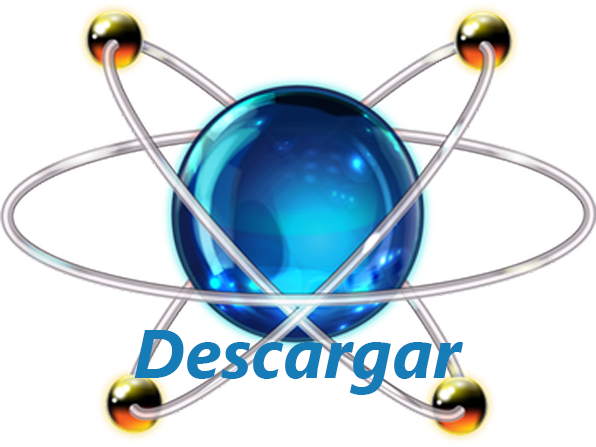
<style>
.page{position:relative;width:596px;height:447px;background:#ffffff}
.page>*{position:absolute;margin:0}
.t1{font:69.5px "SegoeUI-BoldItalic";color:#157cb7}
</style>
<div class="page">
<p class="t1" style="left:134px;top:330px;width:330px;height:65px">Descargar</p>
</div>
